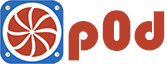
<style>
.page{position:relative;width:167px;height:64px;background:#ffffff}
.page>*{position:absolute;margin:0}
.t1{font:58.3px "Bauhaus93";color:#bb412d}
</style>
<div class="page">
<p class="t1" style="left:68px;top:10px;width:97px;height:51px">p0d</p>
</div>
